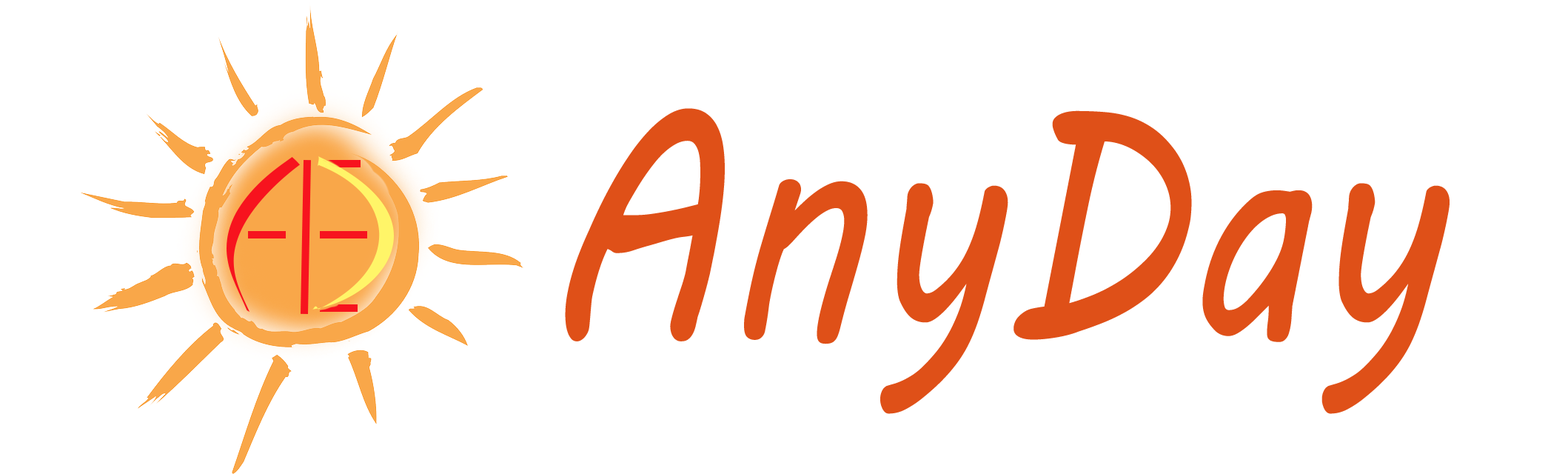
<style>
.page{position:relative;width:1568px;height:474px;background:#ffffff}
.page>*{position:absolute;margin:0}
.t1{font:327.9px "MVBoli";color:#df5018;scale:0.79 1}
</style>
<div class="page">
<p class="t1" style="left:565px;top:108px;width:885px;height:306px">AnyDay</p>
</div>
